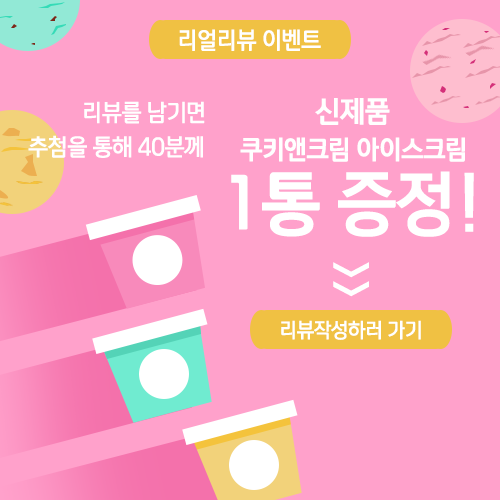
<style>
.page{position:relative;width:500px;height:500px;background:#ffa1cb}
.page>*{position:absolute;margin:0}
.t1{font:22.2px "payboocBold";color:#ffffff;scale:0.95 1}
.t2{font:27.8px "payboocExtraBold";color:#ffffff;scale:0.95 1}
.t3{font:25px "payboocExtraBold";color:#ffffff;scale:0.95 1}
.t4{font:66.7px "payboocExtraBold";color:#ffffff;scale:0.95 1}
.t5{font:38.8px "payboocExtraBold";color:#ffffff;scale:0.9 1}
.t6{font:19.4px "payboocBold";color:#ffffff;scale:0.95 1}
</style>
<div class="page">
<p class="t1" style="left:179px;top:29px;width:142px;height:22px">리얼리뷰 이벤트</p>
<p class="t1" style="left:84px;top:101px;width:121px;height:23px">리뷰를 남기면</p>
<p class="t2" style="left:315px;top:98px;width:75px;height:27px">신제품</p>
<p class="t1" style="left:28px;top:135px;width:175px;height:23px">추첨을 통해 40분께</p>
<p class="t3" style="left:240px;top:137px;width:225px;height:25px">쿠키앤크림 아이스크림</p>
<p class="t4" style="left:231px;top:171px;width:243px;height:66px">1통 증정!</p>
<p class="t5" style="left:333px;top:262px;width:36px;height:35px;rotate:90deg">&gt;&gt;</p>
<p class="t6" style="left:281px;top:320px;width:140px;height:20px">리뷰작성하러 가기</p>
</div>
